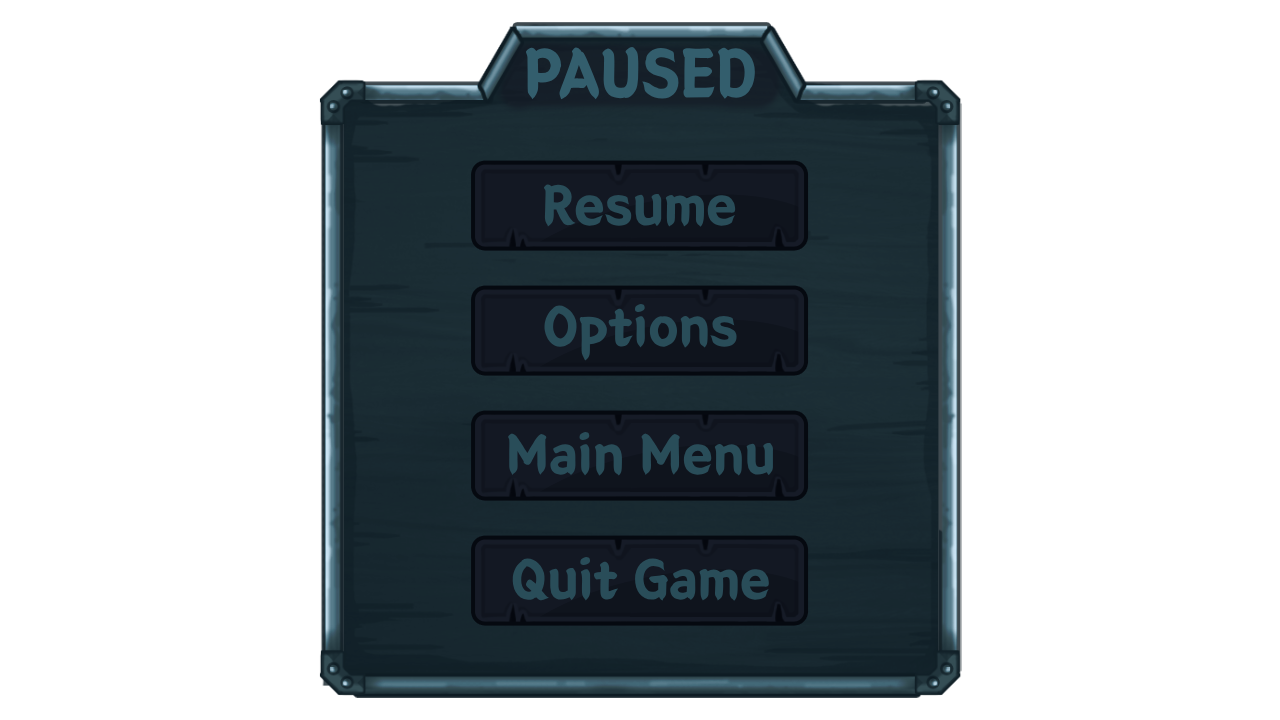
<style>
.page{position:relative;width:1280px;height:720px;background:#ffffff}
.page>*{position:absolute;margin:0}
.t1{font:67.8px "BMEULJIROTTF";color:#335e6d}
.t2{font:55px "BMEULJIROTTF";color:#294d59}
</style>
<div class="page">
<p class="t1" style="left:525px;top:46px;width:230px;height:54px">PAUSED</p>
<p class="t2" style="left:543px;top:184px;width:193px;height:43px">Resume</p>
<p class="t2" style="left:544px;top:304px;width:193px;height:57px">Options</p>
<p class="t2" style="left:508px;top:432px;width:265px;height:44px">Main Menu</p>
<p class="t2" style="left:512px;top:557px;width:257px;height:44px">Quit Game</p>
</div>
